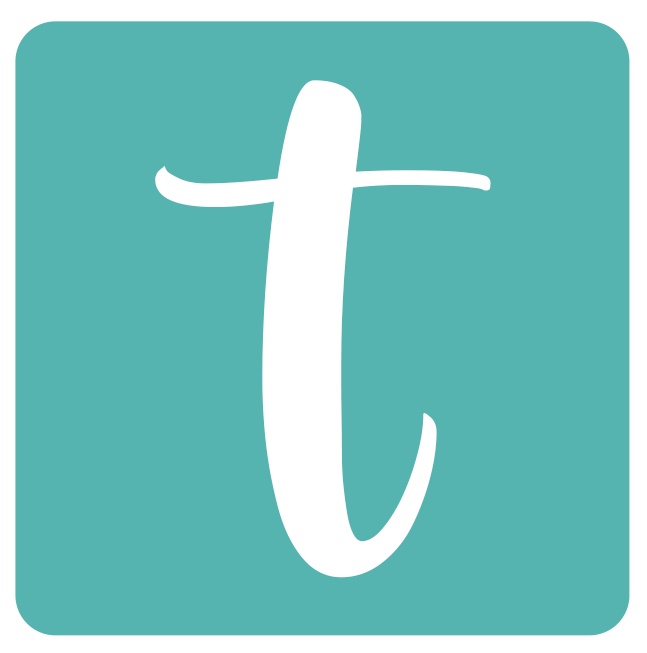
<style>
.page{position:relative;width:647px;height:653px;background:#55b4af}
.page>*{position:absolute;margin:0}
.t1{font:692px "BelladiaDemoRegular";color:#ffffff}
</style>
<div class="page">
<p class="t1" style="left:155px;top:80px;width:336px;height:498px">t</p>
</div>
